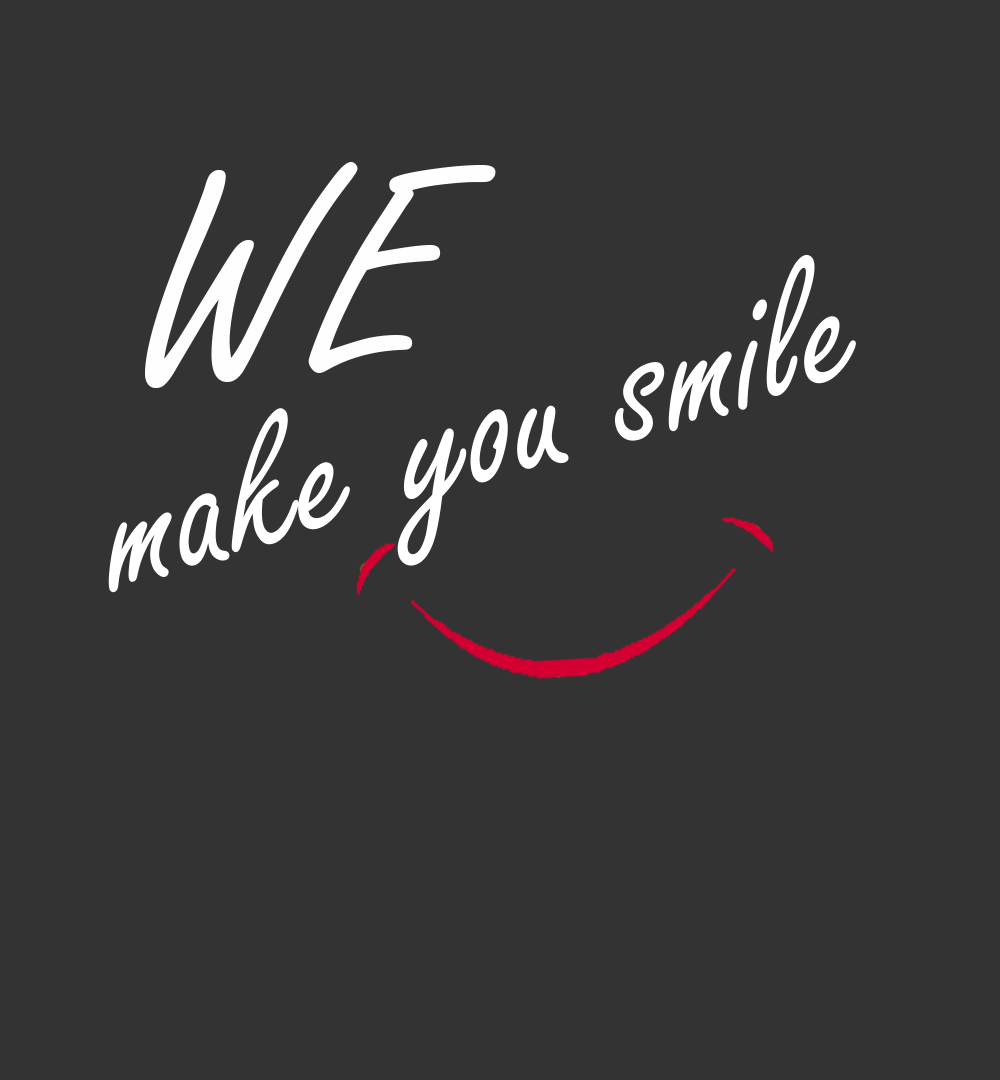
<style>
.page{position:relative;width:1000px;height:1080px;background:#333333}
.page>*{position:absolute;margin:0}
.t1{font:312.5px "FreestyleScript-Regular";color:#fffefe}
.t2{font:206.2px "FreestyleScript-Regular";color:#ffffff}
</style>
<div class="page">
<p class="t1" style="left:145px;top:162px;width:351px;height:226px">WE</p>
<p class="t2" style="left:108px;top:254px;width:748px;height:339px;rotate:-16deg">make you smile</p>
</div>
